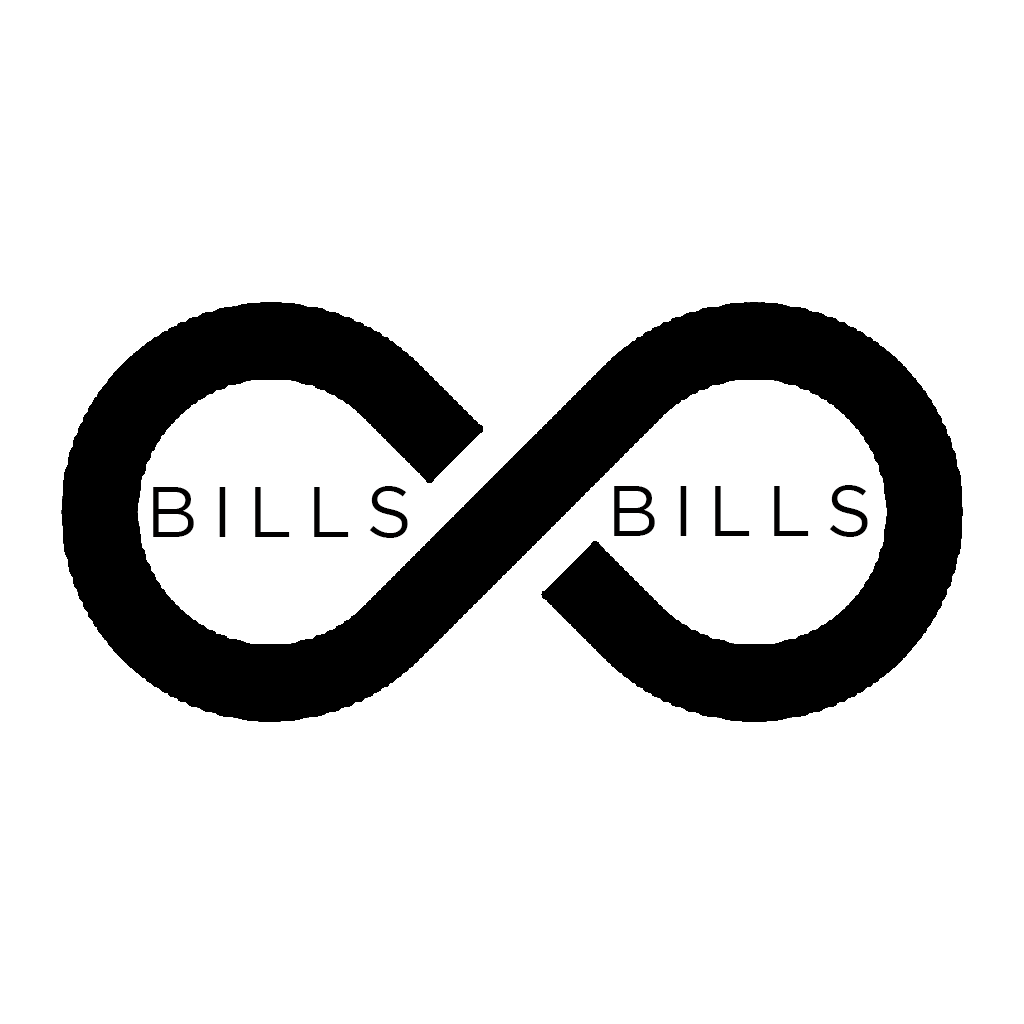
<style>
.page{position:relative;width:1024px;height:1024px;background:#ffffff}
.page>*{position:absolute;margin:0}
.t1{font:72px "Gotham-Book";letter-spacing:0.2em;color:#010000}
</style>
<div class="page">
<p class="t1" style="left:153px;top:486px;width:255px;height:52px">BILLS</p>
<p class="t1" style="left:614px;top:485px;width:254px;height:52px">BILLS</p>
</div>
